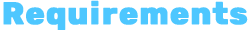
<style>
.page{position:relative;width:250px;height:30px;background:#ffffff}
.page>*{position:absolute;margin:0}
.t1{font:31.4px "Rubik-ExtraBold";letter-spacing:0.02em;color:#4ec7ff;font-weight:bold}
</style>
<div class="page">
<p class="t1" style="left:3px;top:0px;width:245px;height:31px">Requirements</p>
</div>
